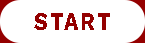
<style>
.page{position:relative;width:145px;height:43px;background:#ffffff}
.page>*{position:absolute;margin:0}
.t1{font:25.3px "WorkSansRoman-Bold";letter-spacing:0.1em;color:#940000;scale:0.84 1}
</style>
<div class="page">
<p class="t1" style="left:34px;top:13px;width:76px;height:17px">START</p>
</div>
